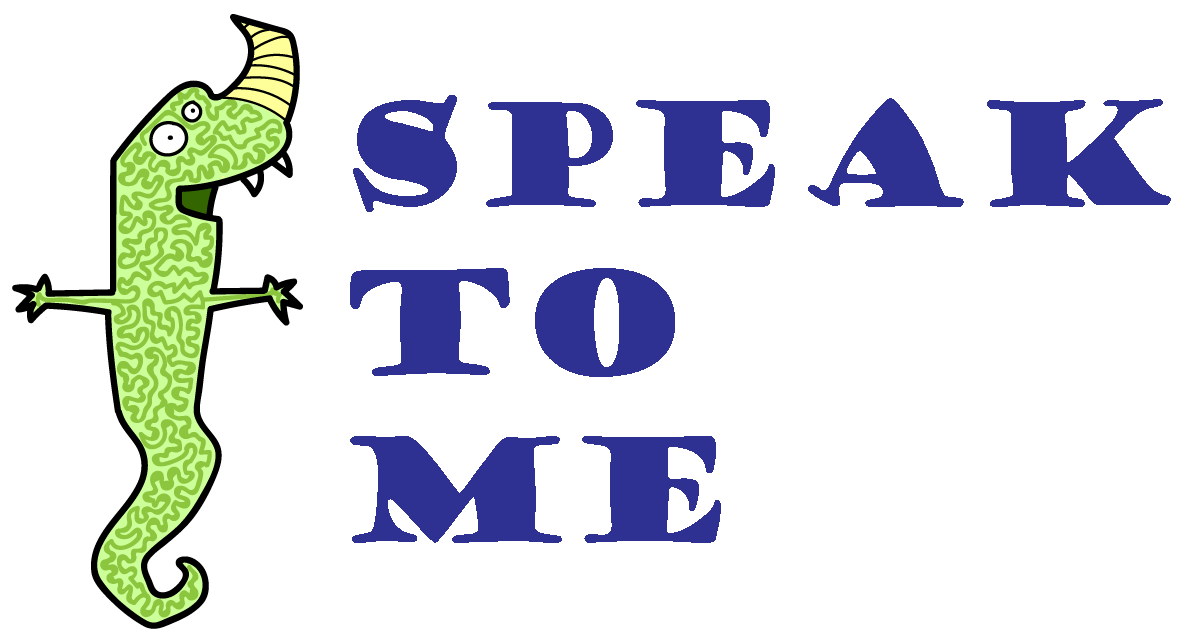
<style>
.page{position:relative;width:1200px;height:638px;background:#ffffff}
.page>*{position:absolute;margin:0}
.t1{font:140px "GoudyStout";color:#2e3192}
</style>
<div class="page">
<p class="t1" style="left:350px;top:95px;width:821px;height:448px">Speak<br>to<br>ME</p>
</div>
